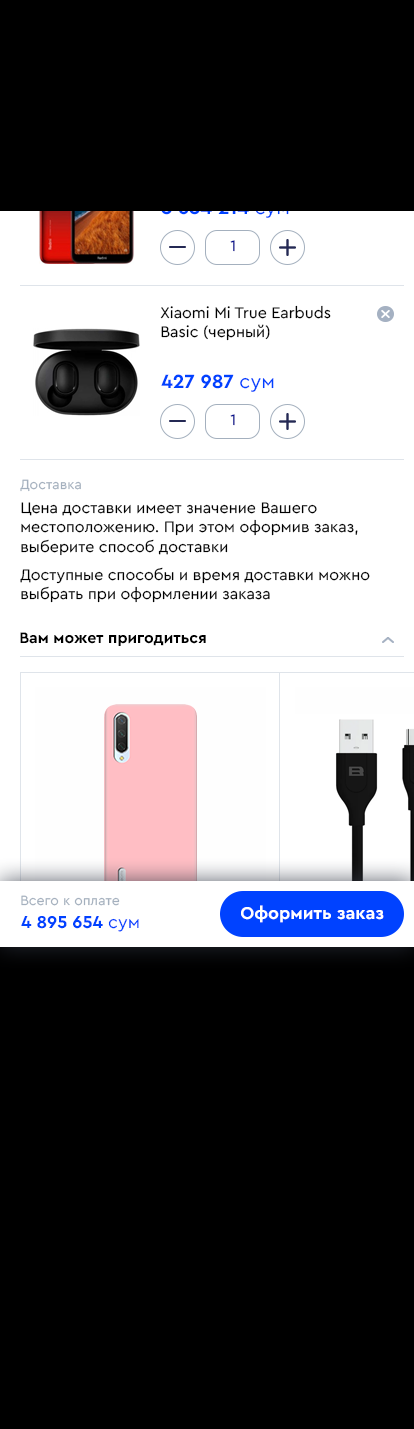
<style>
.page{position:relative;width:414px;height:1429px;background:#000000}
.page>*{position:absolute;margin:0}
.t1{font:20px "CeraPro-Bold";color:#000000}
.t2{font:20px "CeraPro-Regular";color:#000000}
.t3{font:16px "CeraPro-Regular";color:#07108f}
.t4{font:16px "CeraPro-Regular";color:#000000}
.t5{font:20px "CeraPro-Bold";color:#0042ff}
.t6{font:20px "CeraPro-Regular";color:#0042ff}
.t7{font:14.1px "CeraPro-Regular";color:#a4b0be}
.t8{font:16px "CeraPro-Bold";color:#000000}
.t9{font:18px "CeraPro-Bold";color:#ffffff}
.t10{font:18px "CeraPro-Bold";color:#0042ff}
.t11{font:18px "CeraPro-Regular";color:#0042ff}
</style>
<div class="page">
<p class="t1" style="left:161px;top:200px;width:128px;height:18px">5 654 214 <span class="t2">сум</span></p>
<p class="t3" style="left:230px;top:240px;width:5px;height:12px">1</p>
<p class="t4" style="left:160px;top:305px;width:171px;height:36px">Xiaomi Mi True Earbuds<br>Basic (черный)</p>
<p class="t5" style="left:161px;top:374px;width:113px;height:18px">427 987 <span class="t6">сум</span></p>
<p class="t3" style="left:230px;top:414px;width:5px;height:12px">1</p>
<p class="t7" style="left:20px;top:479px;width:61px;height:13px">Доставка</p>
<p class="t4" style="left:21px;top:502px;width:337px;height:54px">Цена доставки имеет значение Вашего<br>местоположению. При этом оформив заказ,<br>выберите способ доставки</p>
<p class="t4" style="left:20px;top:567px;width:350px;height:36px">Доступные способы и время доставки можно<br>выбрать при оформлении заказа</p>
<p class="t8" style="left:20px;top:632px;width:186px;height:14px">Вам может пригодиться</p>
<p class="t7" style="left:21px;top:895px;width:99px;height:11px">Всего к оплате</p>
<p class="t9" style="left:241px;top:905px;width:143px;height:18px">Оформить заказ</p>
<p class="t10" style="left:21px;top:916px;width:118px;height:16px">4 895 654 <span class="t11">сум</span></p>
</div>
